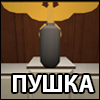
<style>
.page{position:relative;width:100px;height:100px}
.page>*{position:absolute;margin:0}
.t1{font:24px "MyriadPro-Bold";color:#ffffff}
</style>
<div class="page">
<p class="t1" style="left:13px;top:75px;width:81px;height:17px">ПУШКА</p>
</div>
